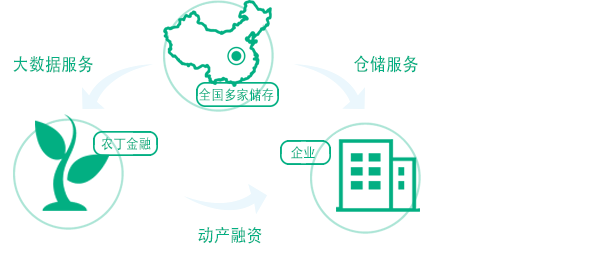
<style>
.page{position:relative;width:609px;height:256px;background:#ffffff}
.page>*{position:absolute;margin:0}
.t1{font:18px "AdobeHeitiStd-Regular";color:#02af82;scale:0.9 1}
.t2{font:14px "AdobeHeitiStd-Regular";color:#02af82;scale:0.9 1}
</style>
<div class="page">
<p class="t1" style="left:13px;top:55px;width:80px;height:18px">大数据服务</p>
<p class="t1" style="left:354px;top:55px;width:64px;height:18px">仓储服务</p>
<p class="t2" style="left:199px;top:88px;width:75px;height:14px">全国多家储存</p>
<p class="t2" style="left:101px;top:137px;width:50px;height:14px">农丁金融</p>
<p class="t2" style="left:291px;top:146px;width:24px;height:13px">企业</p>
<p class="t1" style="left:198px;top:227px;width:64px;height:17px">动产融资</p>
</div>
